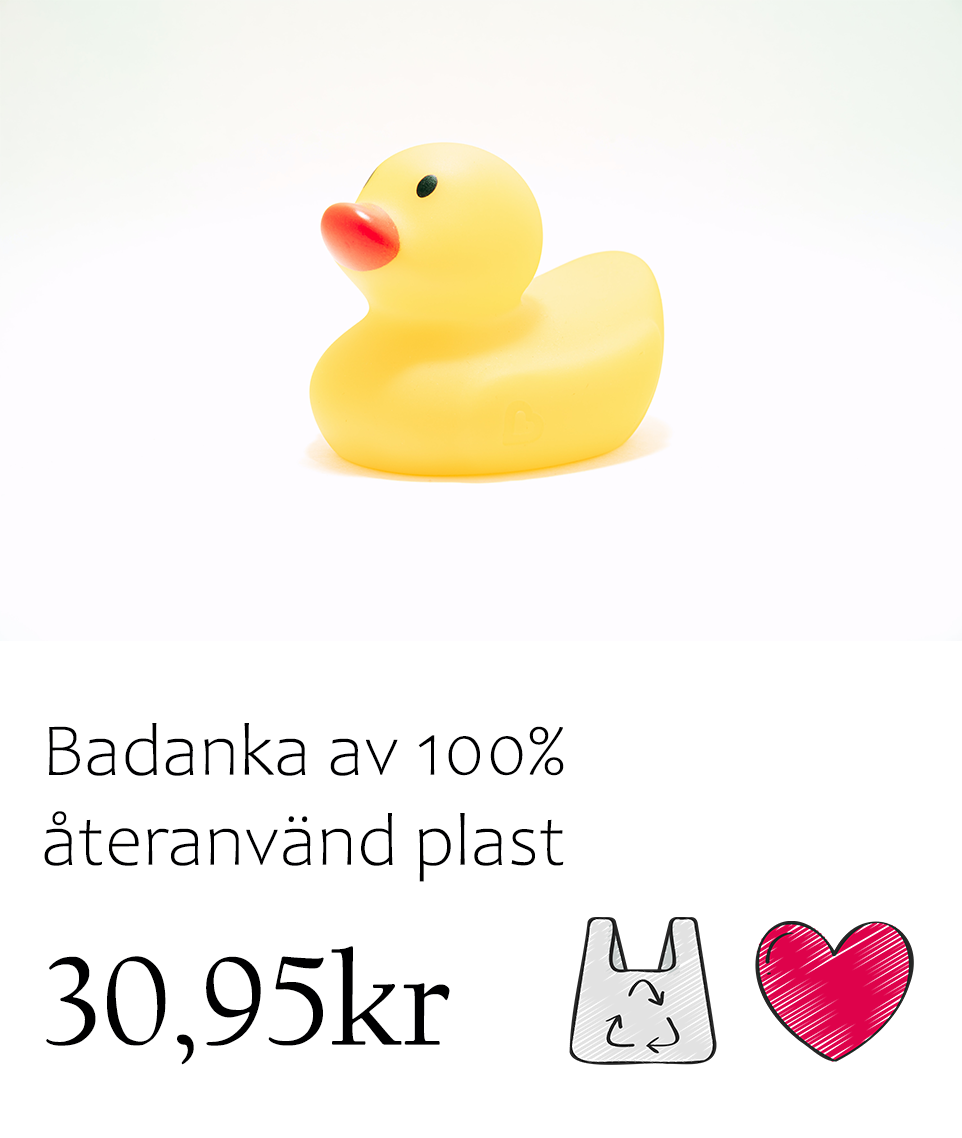
<style>
.page{position:relative;width:962px;height:1138px;background:#ffffff}
.page>*{position:absolute;margin:0}
.t1{font:75px "Candara-Light";color:#000001}
.t2{font:133.3px "CalifornianFB-Reg";color:#000001}
</style>
<div class="page">
<p class="t1" style="left:44px;top:723px;width:520px;height:159px">Badanka av 100% återanvänd plast</p>
<p class="t2" style="left:46px;top:946px;width:404px;height:119px">30,95kr</p>
</div>
